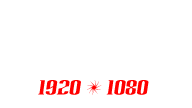
<style>
.page{position:relative;width:192px;height:108px;background:#ffffff}
.page>*{position:absolute;margin:0}
.t1{font:17.6px "Arnprior";color:#ff0000}
</style>
<div class="page">
<p class="t1" style="left:38px;top:80px;width:111px;height:15px">1920 * 1080</p>
</div>
